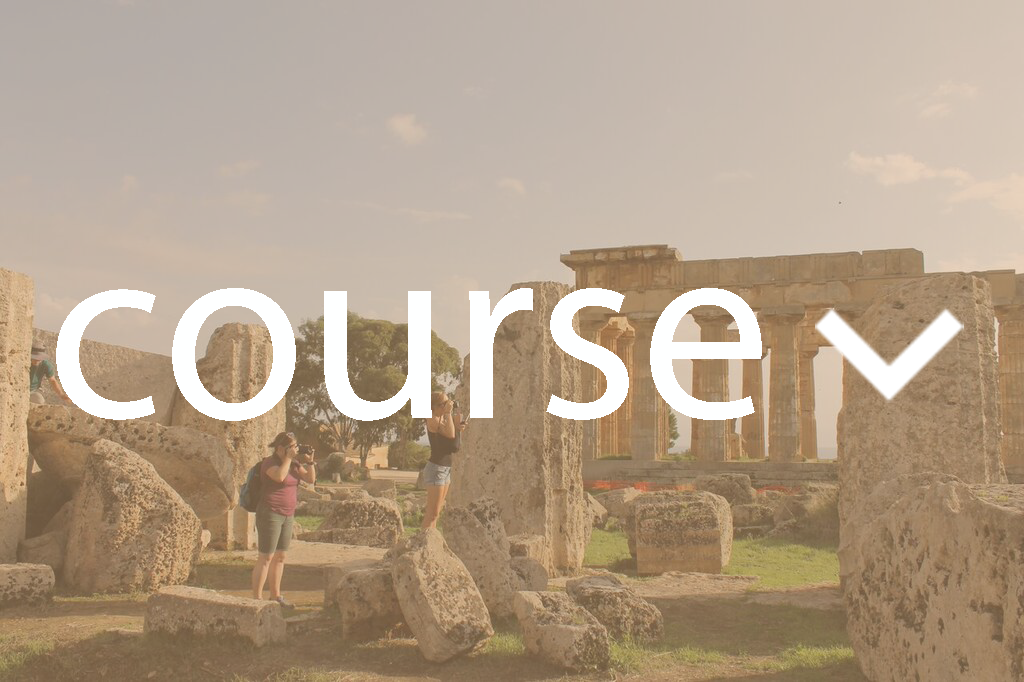
<style>
.page{position:relative;width:1024px;height:682px}
.page>*{position:absolute;margin:0}
.t1{font:262.2px "MyriadPro-Regular";color:#feffff}
</style>
<div class="page">
<p class="t1" style="left:56px;top:288px;width:706px;height:133px">course</p>
</div>
